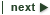
<style>
.page{position:relative;width:50px;height:15px;background:#ffffff}
.page>*{position:absolute;margin:0}
.t1{font:11px "Arial-BoldMT";letter-spacing:0.05em;color:#28452a}
</style>
<div class="page">
<p class="t1" style="left:11px;top:3px;width:25px;height:8px">next</p>
</div>
